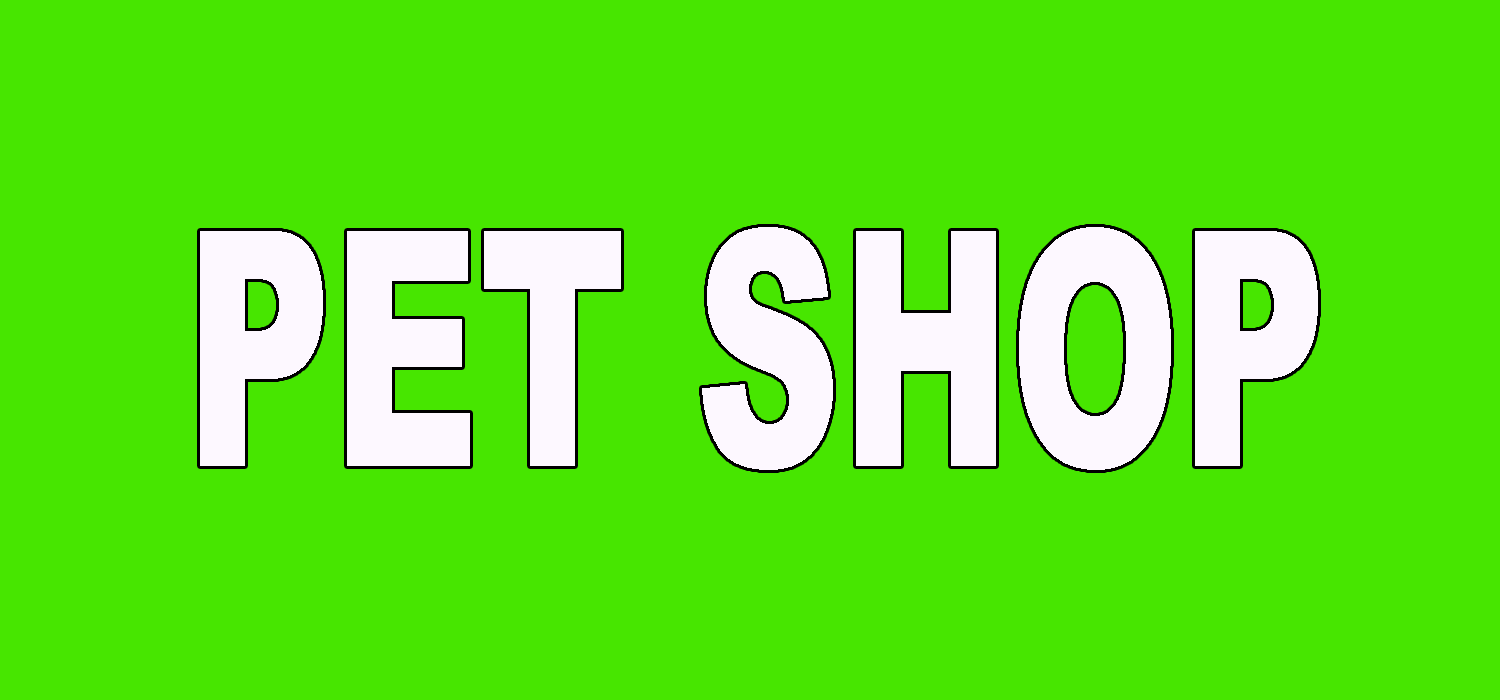
<style>
.page{position:relative;width:1500px;height:700px;background:#47e600}
.page>*{position:absolute;margin:0}
.t1{font:328.1px "Arial-Black";color:#fdf8ff;scale:0.62 1}
</style>
<div class="page">
<p class="t1" style="left:200px;top:227px;width:1118px;height:243px">PET SHOP</p>
</div>
